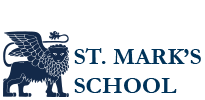
<style>
.page{position:relative;width:205px;height:100px;background:#ffffff}
.page>*{position:absolute;margin:0}
.t1{font:24px "Garamond-Bold";color:#003359}
</style>
<div class="page">
<p class="t1" style="left:74px;top:48px;width:127px;height:45px">ST. MARK’S<br>SCHOOL</p>
</div>
